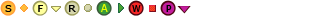
<style>
.page{position:relative;width:320px;height:16px;background:#ffffff}
.page>*{position:absolute;margin:0}
.t1{font:10px "MSReferenceSansSerif";color:#000000;scale:1.05 1}
.t2{font:9.3px "Small Fonts";color:#000000;scale:0.86 1}
.t3{font:10px "Tahoma";color:#000000;scale:1.18 1}
.t4{font:11.3px "Tahoma";color:#eaff00;scale:0.96 1}
.t5{font:10px "Tahoma";color:#000000;scale:0.85 1}
</style>
<div class="page">
<p class="t1" style="left:5px;top:5px;width:7px;height:7px">S</p>
<p class="t2" style="left:38px;top:5px;width:5px;height:7px">F</p>
<p class="t3" style="left:69px;top:5px;width:7px;height:7px">R</p>
<p class="t4" style="left:101px;top:4px;width:7px;height:8px">A</p>
<p class="t5" style="left:132px;top:5px;width:9px;height:7px">W</p>
<p class="t5" style="left:166px;top:5px;width:6px;height:7px">P</p>
</div>
